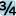
<style>
.page{position:relative;width:16px;height:16px}
.page>*{position:absolute;margin:0}
.t1{font:18.7px "Tahoma";color:#000000}
</style>
<div class="page">
<p class="t1" style="left:0px;top:1px;width:17px;height:15px">¾</p>
</div>
